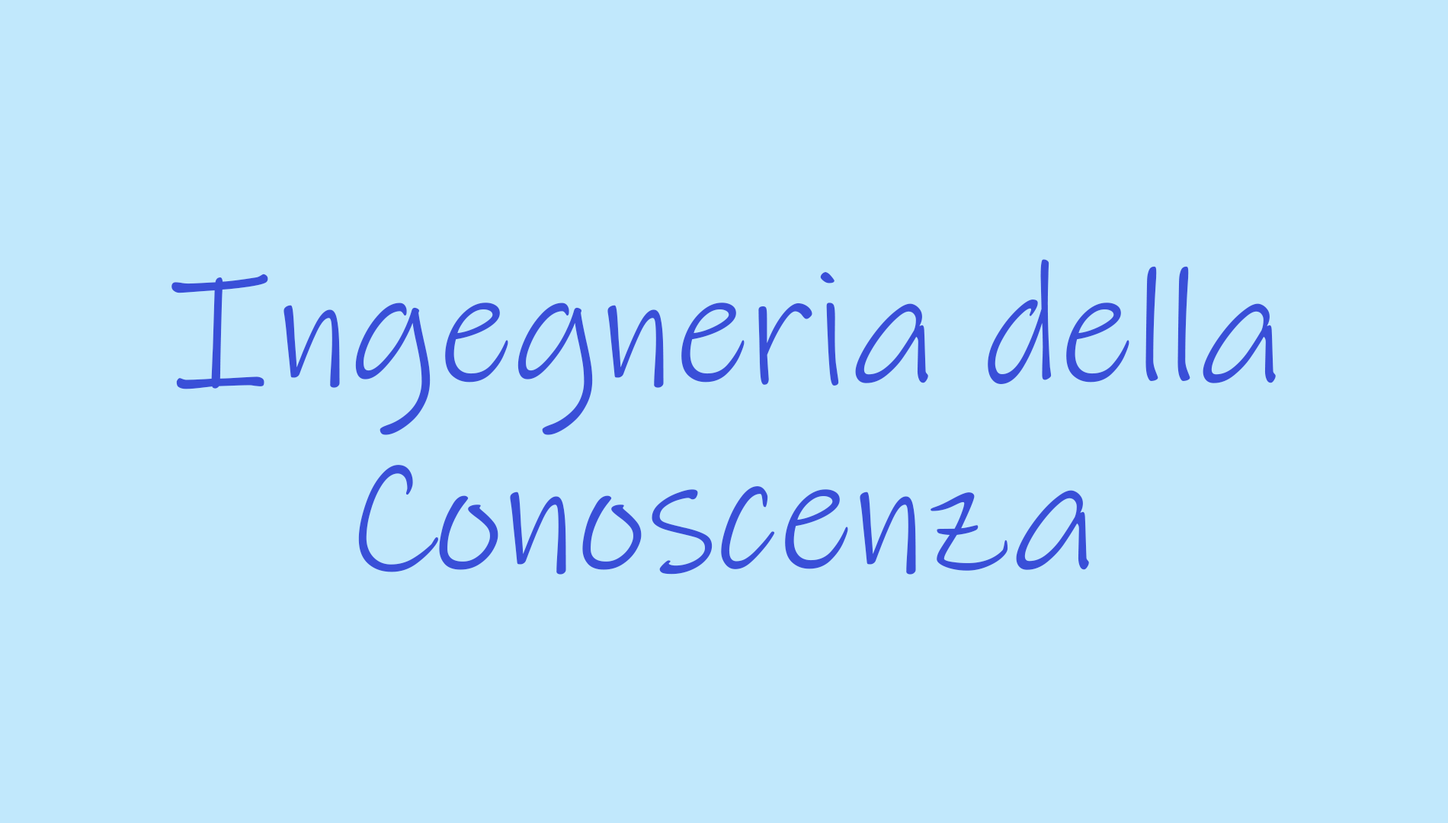
<style>
.page{position:relative;width:1448px;height:823px;background:#c1e8fc}
.page>*{position:absolute;margin:0}
.t1{font:161.4px "InkFree";color:#394fd8}
</style>
<div class="page">
<p class="t1" style="left:172px;top:259px;width:1104px;height:176px">Ingegneria della</p>
<p class="t1" style="left:358px;top:465px;width:731px;height:110px">Conoscenza</p>
</div>
